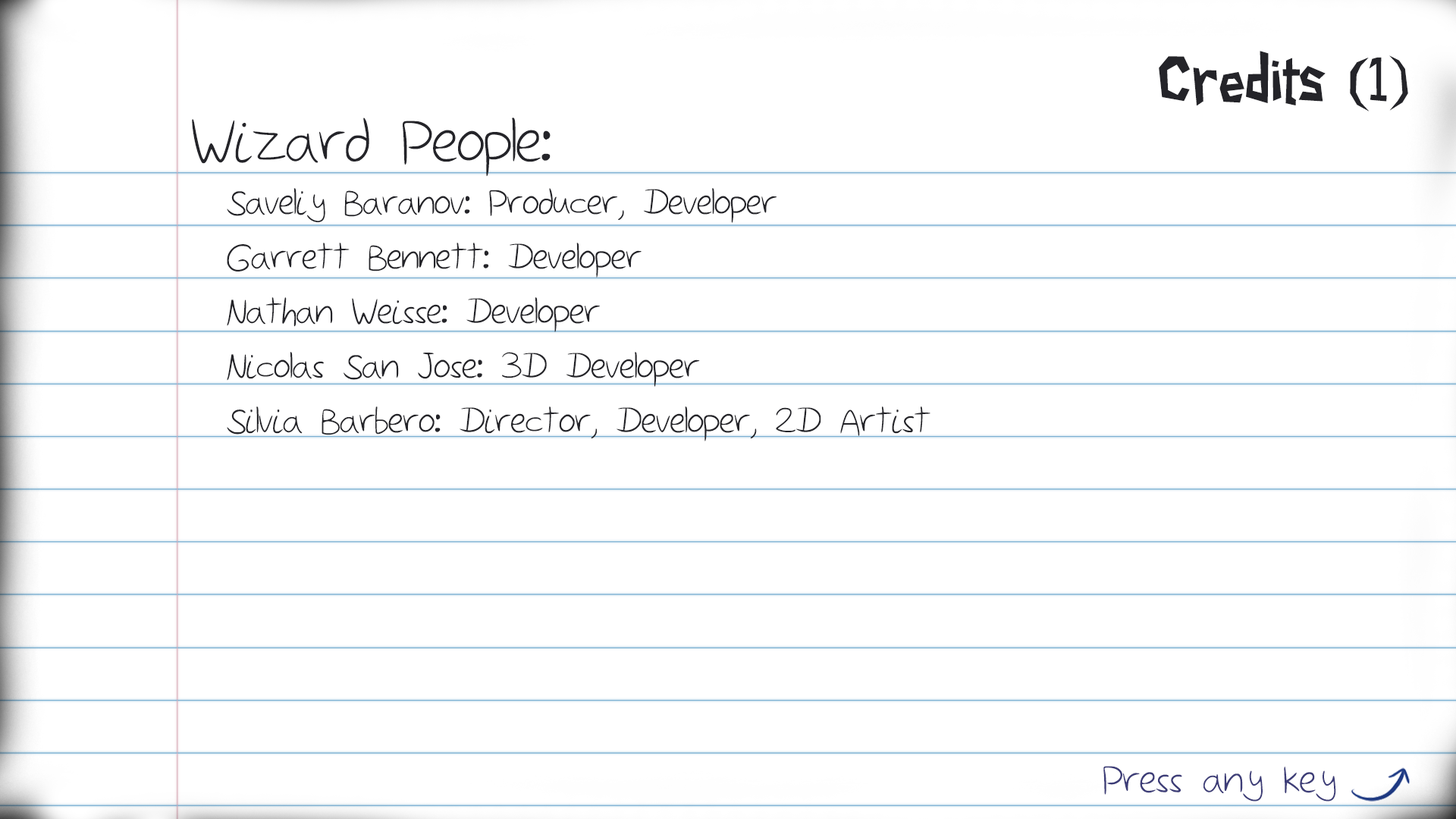
<style>
.page{position:relative;width:1456px;height:819px;background:#ffffff}
.page>*{position:absolute;margin:0}
.t1{font:59.4px "PaperCuts2";color:#242429}
.t2{font:77px "Sketchbook";color:#242429}
.t3{font:45.5px "Sketchbook";color:#242429}
.t4{font:49.5px "Sketchbook";color:#3d3d78}
</style>
<div class="page">
<p class="t1" style="left:1159px;top:51px;width:249px;height:60px">Credits (1)</p>
<p class="t2" style="left:192px;top:118px;width:359px;height:59px">Wizard People:</p>
<p class="t3" style="left:227px;top:188px;width:703px;height:253px">Saveliy Baranov: Producer, Developer<br>Garrett Bennett: Developer<br>Nathan Weisse: Developer<br>Nicolas San Jose: 3D Developer<br>Silvia Barbero: Director, Developer, 2D Artist</p>
<p class="t4" style="left:1103px;top:766px;width:233px;height:36px">Press any key</p>
</div>
